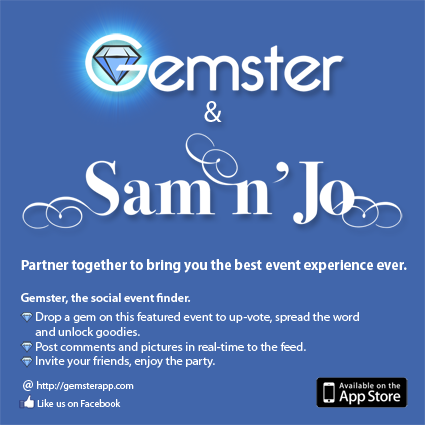
<style>
.page{position:relative;width:425px;height:425px;background:#4166ab}
.page>*{position:absolute;margin:0}
.t1{font:29.9px "MyriadPro-Regular";color:#ffffff}
.t2{font:14.9px "MyriadPro-Bold";color:#ffffff;scale:0.95 1}
.t3{font:12.5px "MyriadPro-Semibold";color:#ffffff}
.t4{font:12.5px "MyriadPro-Regular";color:#ffffff}
.t5{font:14.9px "MyriadPro-Bold";color:#ffffff}
.t6{font:10px "MyriadPro-Regular";color:#ffffff}
</style>
<div class="page">
<p class="t1" style="left:204px;top:101px;width:18px;height:21px">&amp;</p>
<p class="t2" style="left:21px;top:259px;width:386px;height:14px">Partner together to bring you the best event experience ever.</p>
<p class="t3" style="left:21px;top:293px;width:170px;height:11px">Gemster, the social event finder.</p>
<p class="t4" style="left:35px;top:312px;width:324px;height:56px">Drop a gem on this featured event to up-vote, spread the word<br>and unlock goodies.<br>Post comments and pictures in real-time to the feed.<br>Invite your friends, enjoy the party.</p>
<p class="t5" style="left:23px;top:380px;width:10px;height:11px">@</p>
<p class="t6" style="left:37px;top:381px;width:97px;height:10px">http://gemsterapp.com</p>
<p class="t6" style="left:37px;top:399px;width:84px;height:8px">Like us on Facebook</p>
</div>
